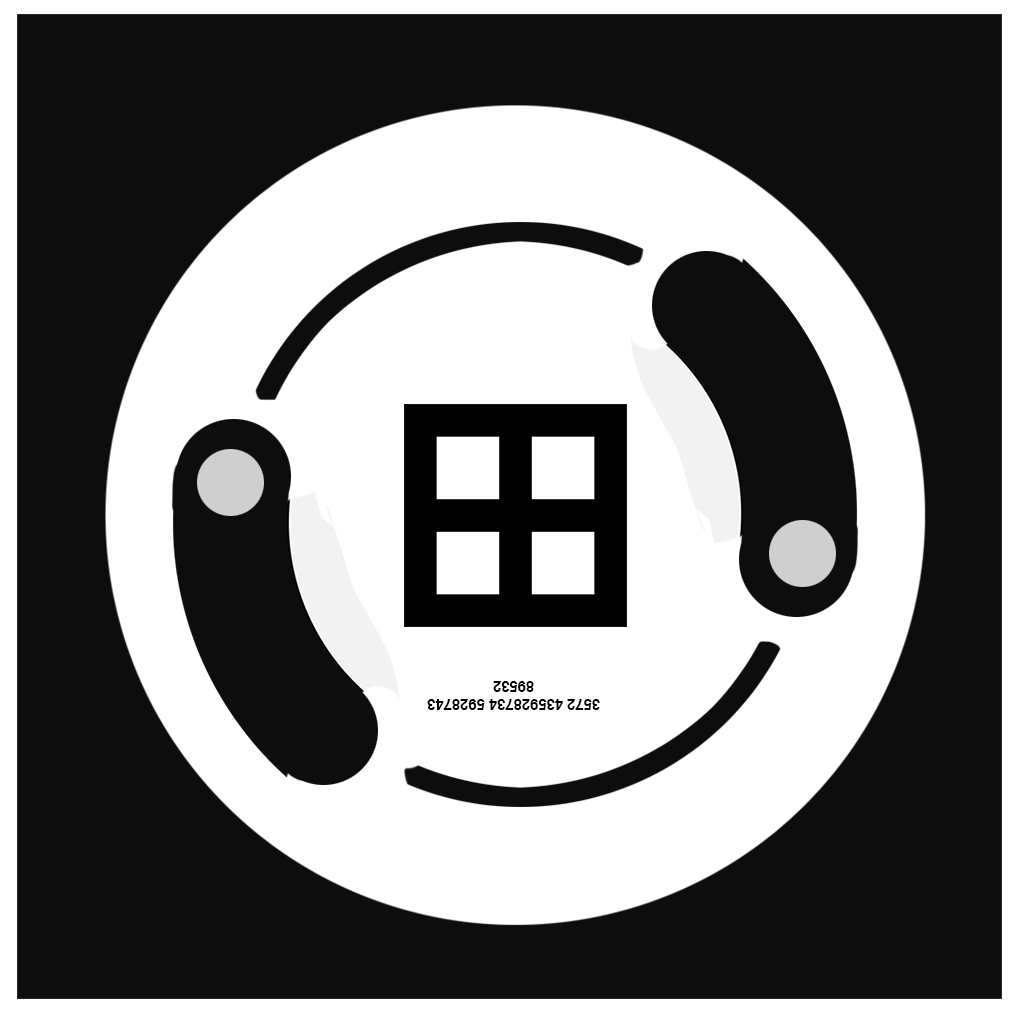
<style>
.page{position:relative;width:1024px;height:1024px;background:#0d0d0d}
.page>*{position:absolute;margin:0}
.t1{font:15px "Helvetica-Bold";color:#000000;text-transform:uppercase}
</style>
<div class="page">
<p class="t1" style="left:427px;top:681px;width:173px;height:29px;text-align:center;rotate:180deg">3572 435928734 5928743<br>89532</p>
</div>
